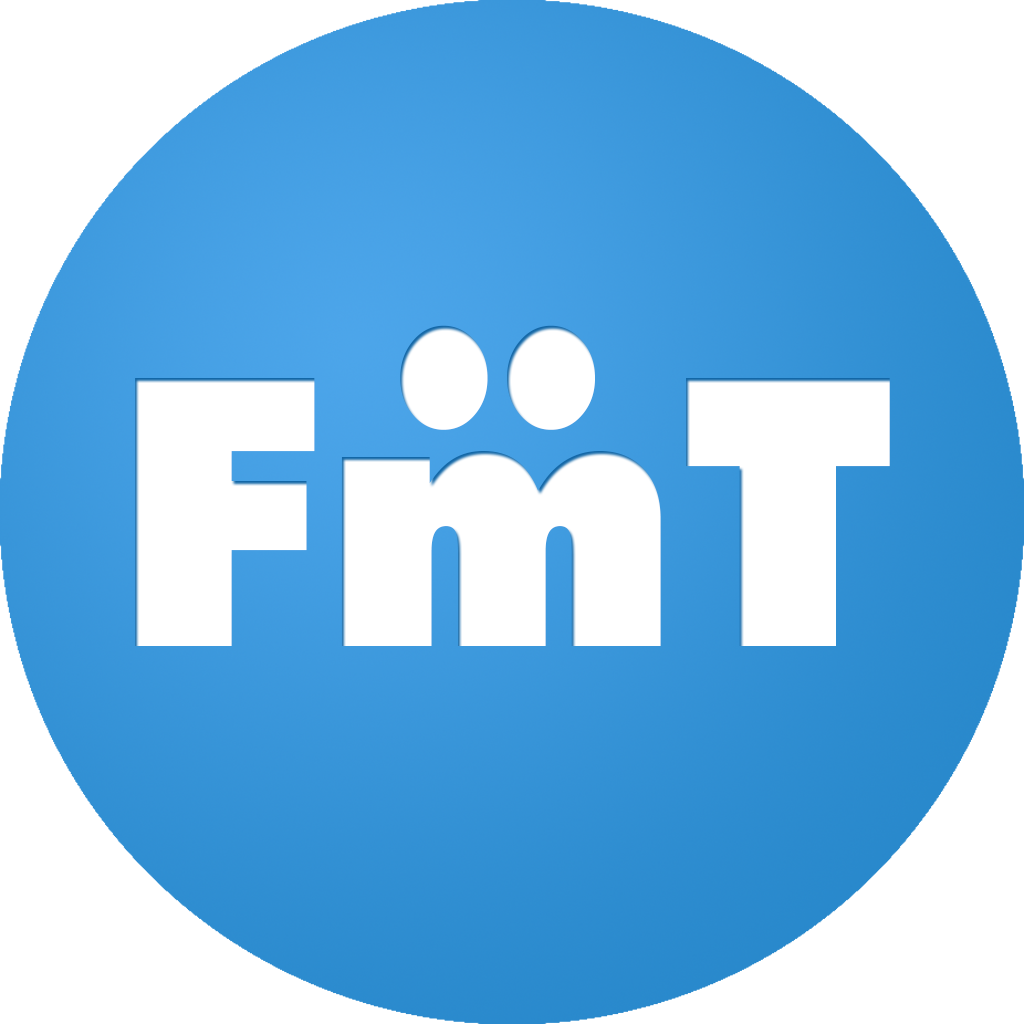
<style>
.page{position:relative;width:1024px;height:1024px;background:#ffffff}
.page>*{position:absolute;margin:0}
.t1{font:375px "FuturaBT-ExtraBlack";color:#ffffff}
</style>
<div class="page">
<p class="t1" style="left:400px;top:325px;width:195px;height:105px;rotate:-90deg">:</p>
<p class="t1" style="left:135px;top:378px;width:755px;height:268px">FmT</p>
</div>
